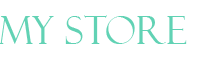
<style>
.page{position:relative;width:200px;height:60px;background:#ffffff}
.page>*{position:absolute;margin:0}
.t1{font:38px "FelixTitlingMT";color:#61d2b4}
</style>
<div class="page">
<p class="t1" style="left:0px;top:15px;width:187px;height:29px">MY STORE</p>
</div>
